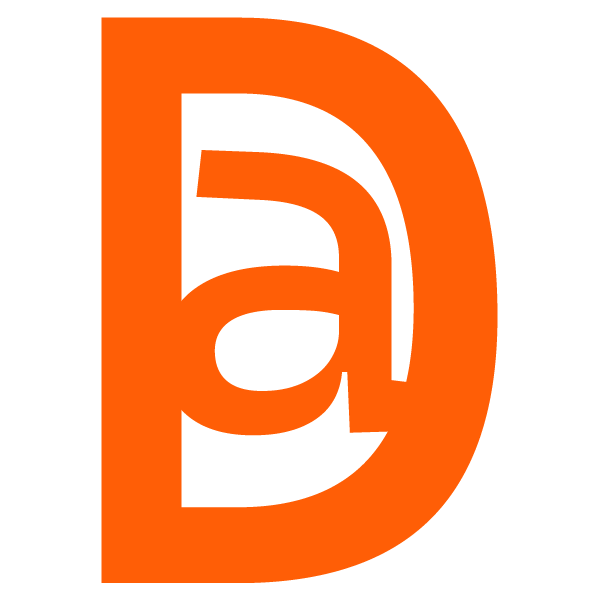
<style>
.page{position:relative;width:600px;height:600px;background:#ffffff}
.page>*{position:absolute;margin:0}
.t1{font:815.4px "CascadiaCode";color:#ff5e06}
.t2{font:530.8px "CascadiaCode";color:#ff5e06}
</style>
<div class="page">
<p class="t1" style="left:101px;top:17px;width:397px;height:566px">D</p>
<p class="t2" style="left:162px;top:150px;width:277px;height:286px">a</p>
</div>
